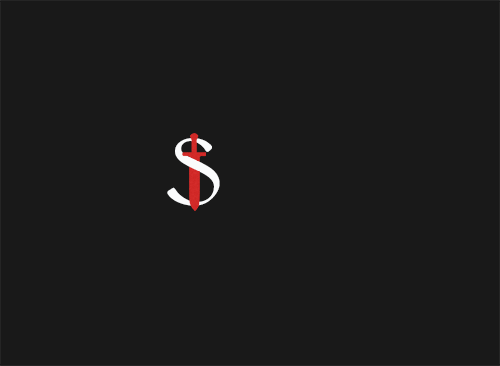
<style>
.page{position:relative;width:500px;height:366px;background:#191919}
.page>*{position:absolute;margin:0}
.t1{font:80px "Bridgnorth-Regular";color:#fafbfc}
</style>
<div class="page">
<p class="t1" style="left:167px;top:138px;width:53px;height:68px">S</p>
</div>
